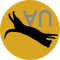
<style>
.page{position:relative;width:60px;height:60px;background:#d9a520}
.page>*{position:absolute;margin:0}
.t1{font:24.2px "Code-Pro-Demo";color:#8a8987}
</style>
<div class="page">
<p class="t1" style="left:22px;top:10px;width:30px;height:17px">au</p>
</div>
